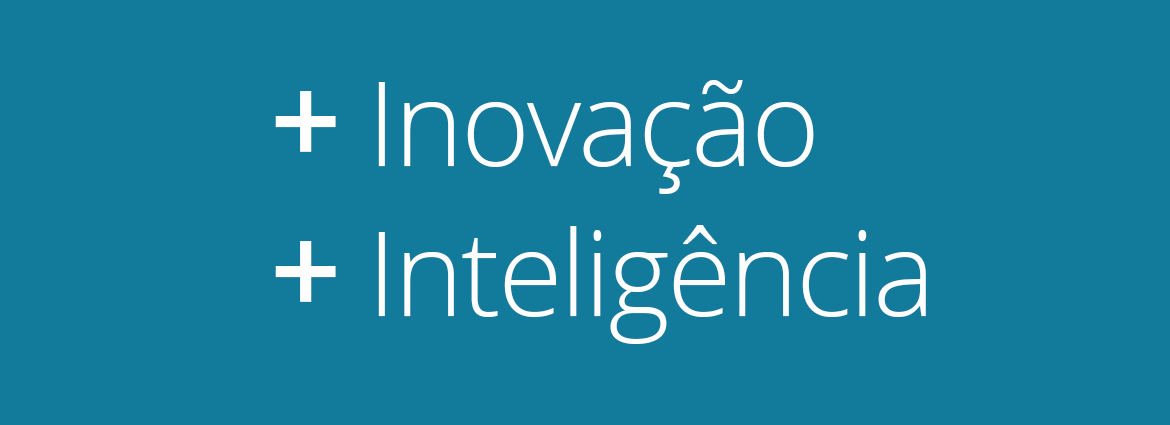
<style>
.page{position:relative;width:1170px;height:425px;background:#127b9b}
.page>*{position:absolute;margin:0}
.t1{font:118px/150px "OpenSans-Light";letter-spacing:-0.025em;color:#ffffff}
.t2{font:125px/150px "OpenSans-Semibold";letter-spacing:-0.025em;color:#ffffff}
</style>
<div class="page">
<p class="t1" style="left:275px;top:80px;width:651px;height:264px"><span class="t2">+ </span>Inovação<br><span class="t2">+ </span>Inteligência</p>
</div>
